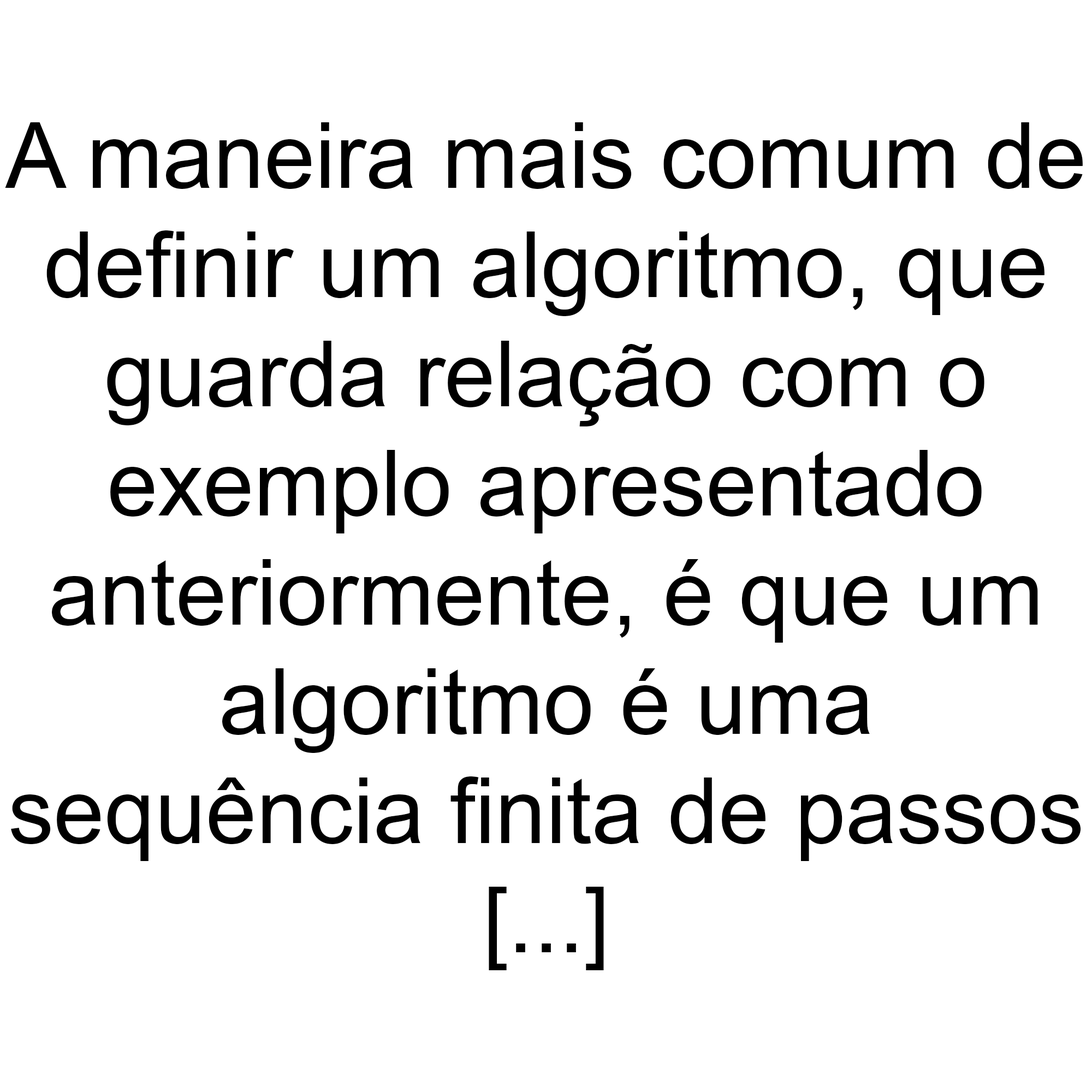
<style>
.page{position:relative;width:1092px;height:1092px;background:#ffffff}
.page>*{position:absolute;margin:0}
.t1{font:91px "ArialMT";color:#000000}
</style>
<div class="page">
<p class="t1" style="left:5px;top:122px;width:1078px;height:848px;text-align:center">A maneira mais comum de<br>definir um algoritmo, que<br>guarda relação com o<br>exemplo apresentado<br>anteriormente, é que um<br>algoritmo é uma<br>sequência finita de passos<br>[...]</p>
</div>
